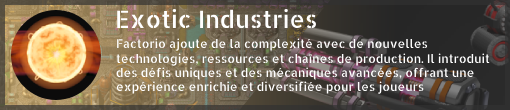
<style>
.page{position:relative;width:510px;height:110px}
.page>*{position:absolute;margin:0}
.t1{font:24px "AllertaStencil-Regular";color:#ffffff}
.t2{font:12px "AllertaStencil-Regular";color:#ffffff}
</style>
<div class="page">
<p class="t1" style="left:117px;top:8px;width:199px;height:21px">Exotic Industries</p>
<p class="t2" style="left:116px;top:38px;width:374px;height:56px">Factorio ajoute de la complexité avec de nouvelles technologies, ressources et chaînes de production. Il introduit des défis uniques et des mécaniques avancées, offrant une expérience enrichie et diversifiée pour les joueurs expérimentés.</p>
</div>
